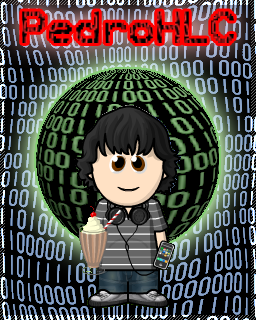
<style>
.page{position:relative;width:256px;height:320px;background:#000000}
.page>*{position:absolute;margin:0}
.t1{font:36px "Terminal"}
</style>
<div class="page">
<p class="t1" style="left:22px;top:11px;width:212px;height:32px">PedroHLC</p>
</div>
